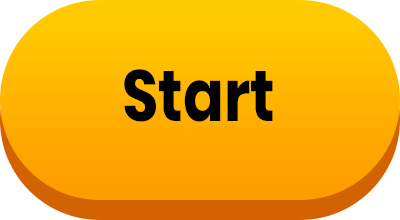
<style>
.page{position:relative;width:400px;height:220px}
.page>*{position:absolute;margin:0}
.t1{font:72px "Poppins-Bold";color:#000000;scale:0.83 1}
</style>
<div class="page">
<p class="t1" style="left:124px;top:69px;width:149px;height:53px">Start</p>
</div>
